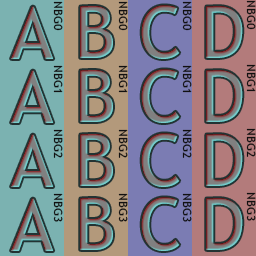
<style>
.page{position:relative;width:256px;height:256px}
.page>*{position:absolute;margin:0}
.t1{font:11.6px "TrebuchetMS";color:#111010;scale:1.04 1}
</style>
<div class="page">
<p class="t1" style="left:53px;top:1px;width:10px;height:30px;rotate:90deg">NBG0</p>
<p class="t1" style="left:118px;top:1px;width:10px;height:30px;rotate:90deg">NBG0</p>
<p class="t1" style="left:182px;top:1px;width:10px;height:30px;rotate:90deg">NBG0</p>
<p class="t1" style="left:246px;top:0px;width:10px;height:30px;rotate:90deg">NBG0</p>
<p class="t1" style="left:53px;top:65px;width:10px;height:28px;rotate:90deg">NBG1</p>
<p class="t1" style="left:118px;top:65px;width:10px;height:28px;rotate:90deg">NBG1</p>
<p class="t1" style="left:182px;top:65px;width:10px;height:28px;rotate:90deg">NBG1</p>
<p class="t1" style="left:246px;top:64px;width:10px;height:28px;rotate:90deg">NBG1</p>
<p class="t1" style="left:53px;top:129px;width:10px;height:29px;rotate:90deg">NBG2</p>
<p class="t1" style="left:118px;top:129px;width:10px;height:29px;rotate:90deg">NBG2</p>
<p class="t1" style="left:182px;top:129px;width:10px;height:29px;rotate:90deg">NBG2</p>
<p class="t1" style="left:246px;top:128px;width:10px;height:29px;rotate:90deg">NBG2</p>
<p class="t1" style="left:53px;top:193px;width:10px;height:29px;rotate:90deg">NBG3</p>
<p class="t1" style="left:118px;top:193px;width:10px;height:29px;rotate:90deg">NBG3</p>
<p class="t1" style="left:182px;top:193px;width:10px;height:29px;rotate:90deg">NBG3</p>
<p class="t1" style="left:246px;top:192px;width:10px;height:29px;rotate:90deg">NBG3</p>
</div>
